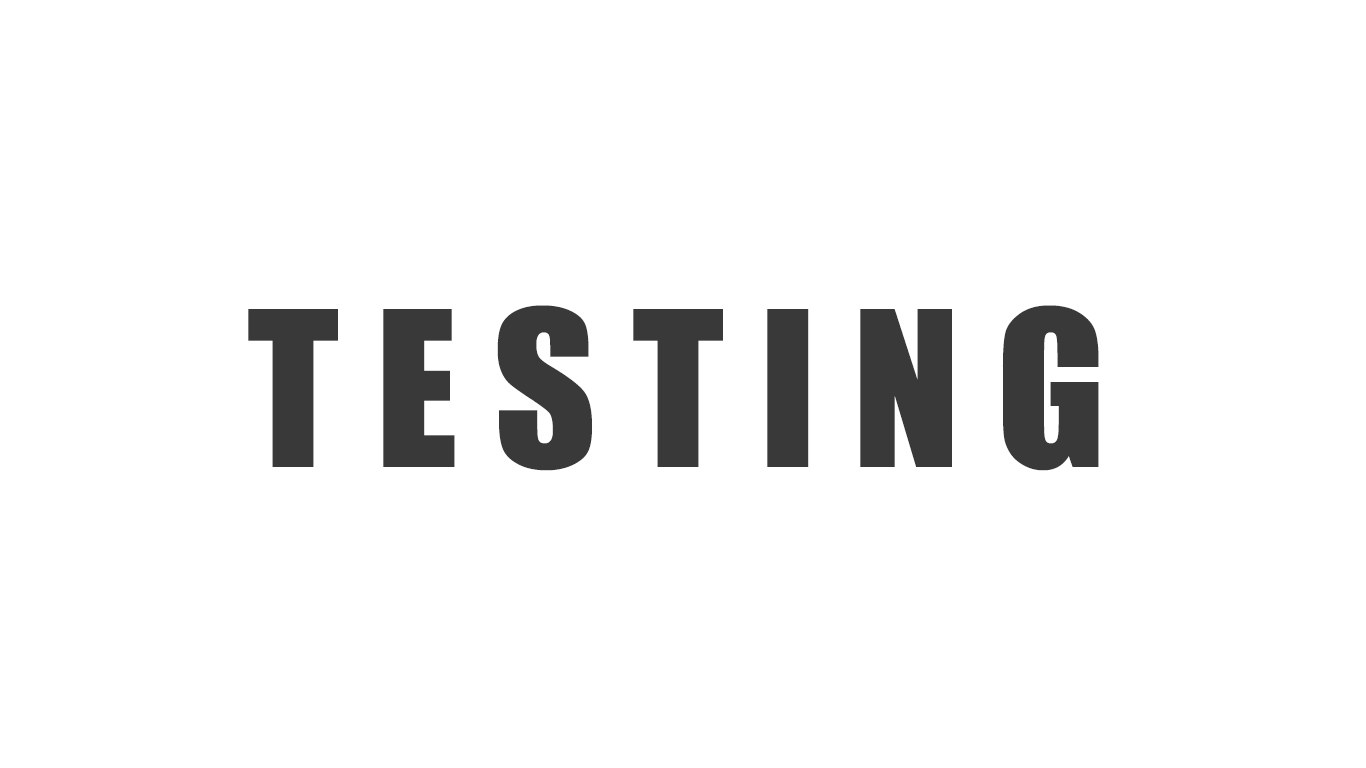
<style>
.page{position:relative;width:1366px;height:768px;background:#ffffff}
.page>*{position:absolute;margin:0}
.t1{font:200px "Impact";color:#393939}
</style>
<div class="page">
<p class="t1" style="left:248px;top:305px;width:851px;height:166px">T E S T I N G</p>
</div>
